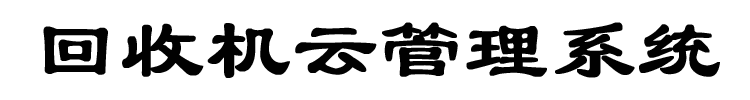
<style>
.page{position:relative;width:750px;height:100px;background:#ffffff}
.page>*{position:absolute;margin:0}
.t1{font:84px "LiSu";color:#010101;font-weight:bold}
</style>
<div class="page">
<p class="t1" style="left:43px;top:22px;width:677px;height:56px">回收机云管理系统</p>
</div>
